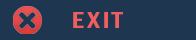
<style>
.page{position:relative;width:196px;height:40px;background:#1e364f}
.page>*{position:absolute;margin:0}
.t1{font:22.7px "BebasNeue-Regular";letter-spacing:0.06em;color:#ee5f60;text-transform:uppercase;scale:1.49 1}
</style>
<div class="page">
<p class="t1" style="left:73px;top:12px;width:50px;height:16px">exit</p>
</div>
